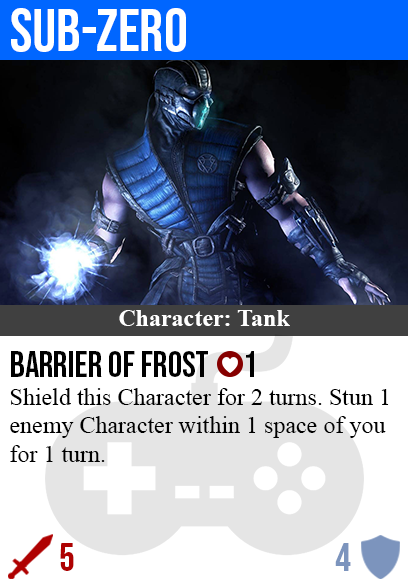
<style>
.page{position:relative;width:408px;height:585px;background:#ffffff}
.page>*{position:absolute;margin:0}
.t1{font:60px "BebasNeue-Regular";color:#ffffff}
.t2{font:24px "TimesNewRomanPS-BoldMT";color:#ffffff}
.t3{font:36px "BebasNeue-Regular";color:#000000}
.t4{font:24px "TimesNewRomanPSMT";color:#000000}
.t5{font:40px "BebasNeue-Regular";color:#af0202}
.t6{font:40px "BebasNeue-Regular";color:#7c94bd}
</style>
<div class="page">
<p class="t1" style="left:11px;top:8px;width:175px;height:44px">sub-zero</p>
<p class="t2" style="left:119px;top:310px;width:171px;height:16px">Character: Tank</p>
<p class="t3" style="left:11px;top:351px;width:243px;height:26px">barrier of frost      1</p>
<p class="t4" style="left:10px;top:388px;width:379px;height:74px">Shield this Character for 2 turns. Stun 1<br>enemy Character within 1 space of you<br>for 1 turn.</p>
<p class="t5" style="left:60px;top:543px;width:14px;height:28px">5</p>
<p class="t6" style="left:335px;top:543px;width:16px;height:28px">4</p>
</div>
